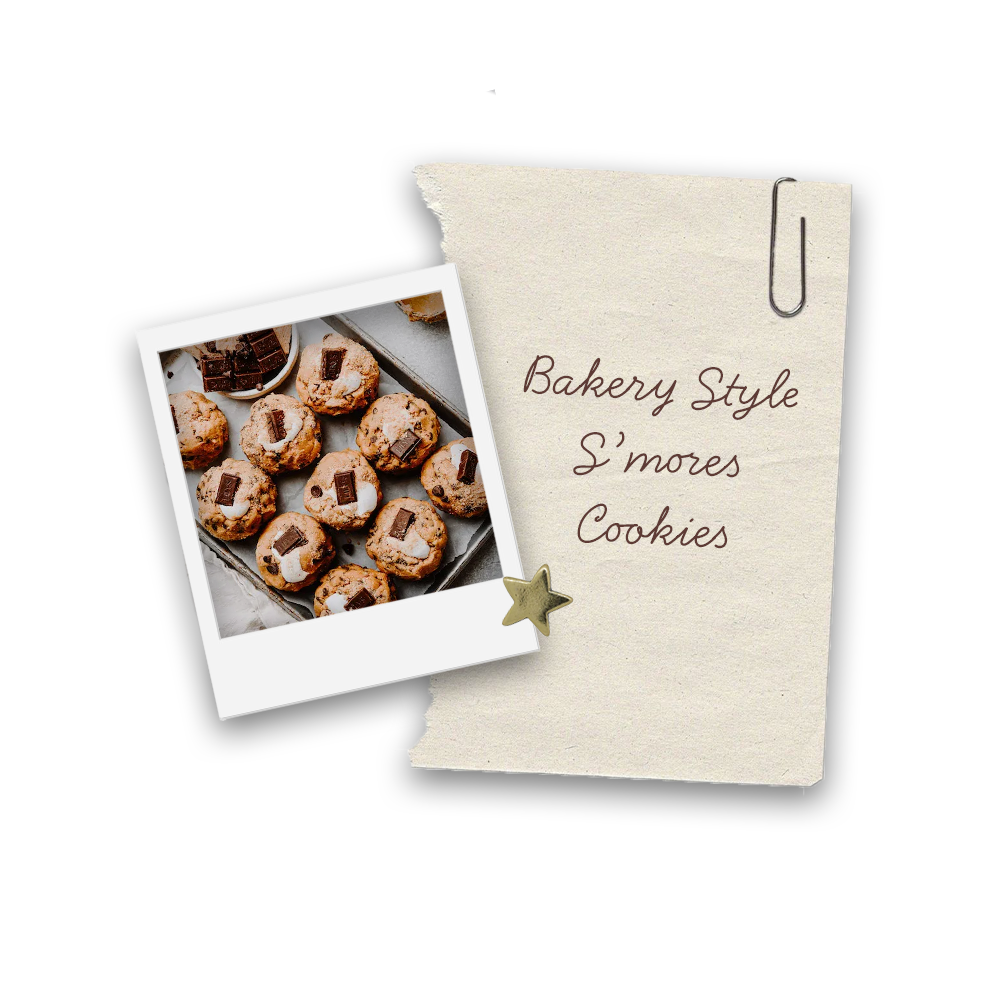
<style>
.page{position:relative;width:1000px;height:1000px;background:#ffffff}
.page>*{position:absolute;margin:0}
.t1{font:60px/72px "HandsomePro";color:#5e3b35}
</style>
<div class="page">
<p class="t1" style="left:523px;top:355px;width:276px;height:194px;text-align:center;rotate:3deg">Bakery Style S’mores <br>Cookies</p>
</div>
